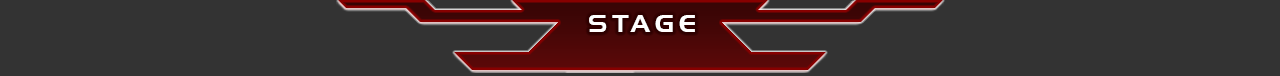
<style>
.page{position:relative;width:1280px;height:76px;background:#333333}
.page>*{position:absolute;margin:0}
.t1{font:23.1px "HandelGothicBT-Regular";letter-spacing:0.2em;color:#ffffff;scale:1.11 1}
</style>
<div class="page">
<p class="t1" style="left:589px;top:15px;width:106px;height:17px">STAGE</p>
</div>
